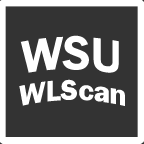
<style>
.page{position:relative;width:144px;height:144px;background:#333333}
.page>*{position:absolute;margin:0}
.t1{font:48px "FranklinGothic-Demi";color:#ffffff}
.t2{font:30px "FranklinGothic-Demi";color:#ffffff}
</style>
<div class="page">
<p class="t1" style="left:20px;top:35px;width:99px;height:38px">WSU</p>
<p class="t2" style="left:19px;top:79px;width:106px;height:27px">WLScan</p>
</div>
